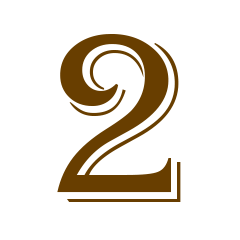
<style>
.page{position:relative;width:240px;height:240px;background:#ffffff}
.page>*{position:absolute;margin:0}
.t1{font:250px "Algerian";color:#683e00}
</style>
<div class="page">
<p class="t1" style="left:57px;top:34px;width:124px;height:168px">2</p>
</div>
